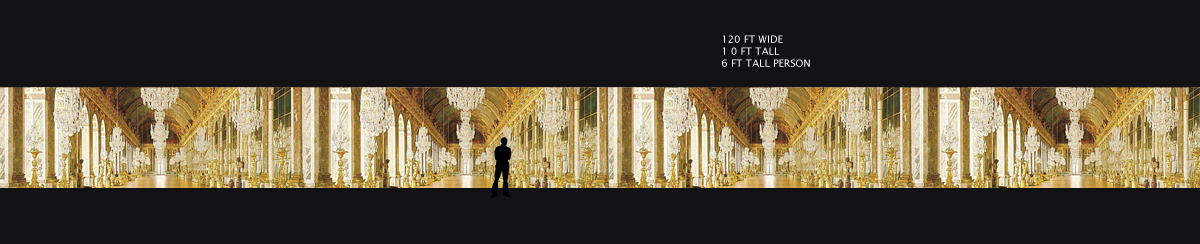
<style>
.page{position:relative;width:1200px;height:244px;background:#121215}
.page>*{position:absolute;margin:0}
.t1{font:10px "LucidaSans";color:#ffffff}
</style>
<div class="page">
<p class="t1" style="left:722px;top:35px;width:88px;height:32px">120 FT WIDE<br>1 0 FT TALL<br>6 FT TALL PERSON</p>
</div>
